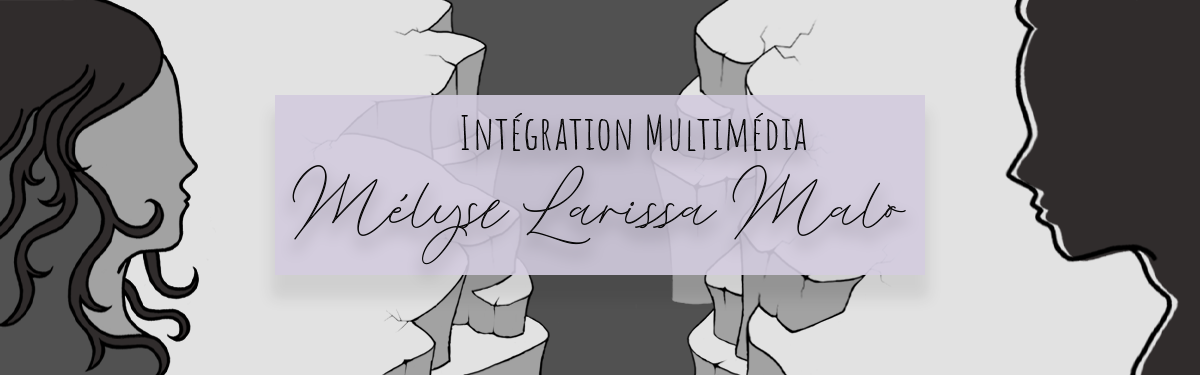
<style>
.page{position:relative;width:1200px;height:375px;background:#e2e2e2}
.page>*{position:absolute;margin:0}
.t1{font:45.8px "AmaticSC-Regular";letter-spacing:0.025em;color:#060606}
.t2{font:104.2px "CochocibScriptLatinPro";color:#0b0a0a}
</style>
<div class="page">
<p class="t1" style="left:461px;top:113px;width:345px;height:39px">Intégration Multimédia</p>
<p class="t2" style="left:292px;top:165px;width:614px;height:100px">Mélyse Larissa Malo</p>
</div>
